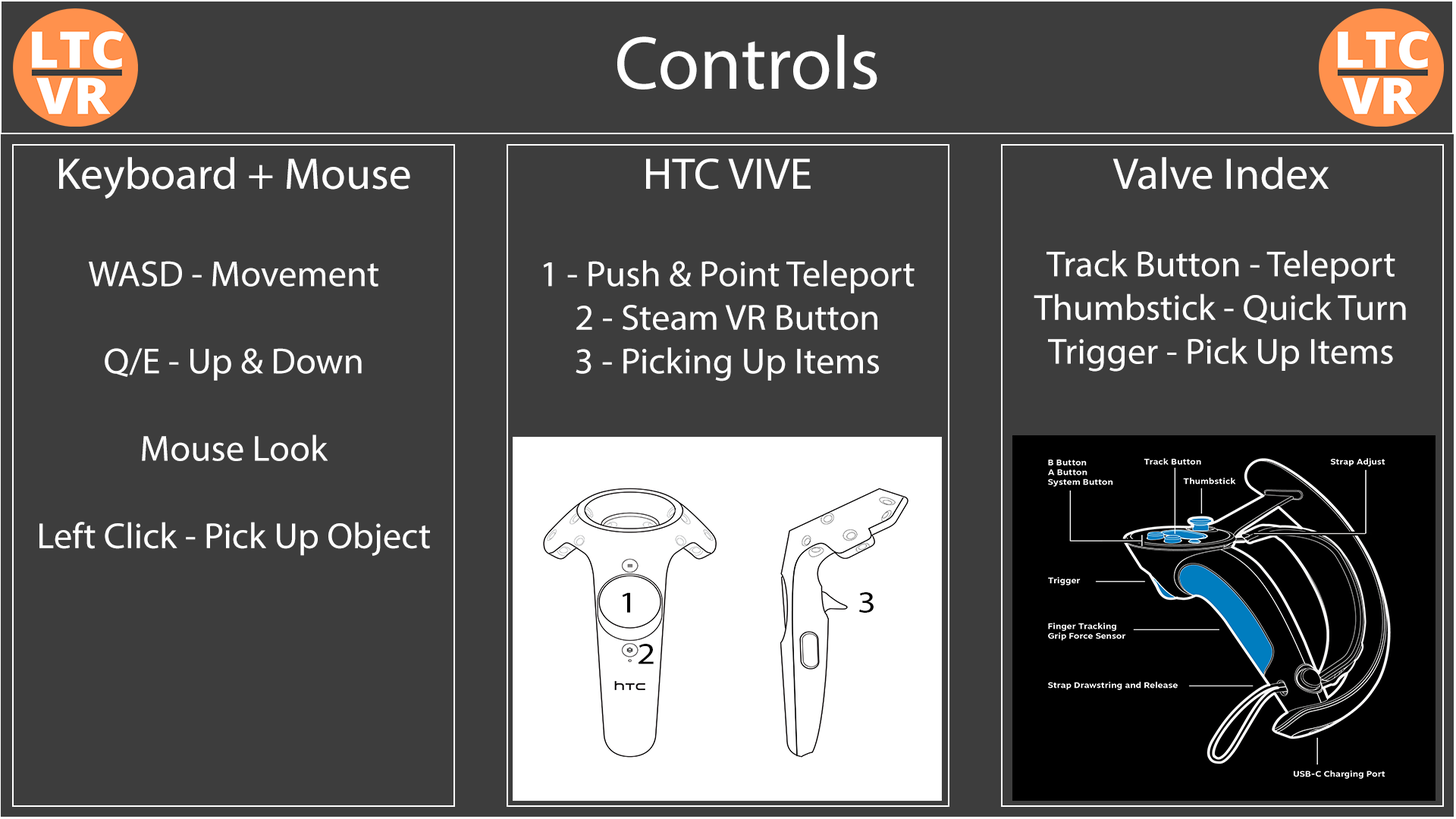
<style>
.page{position:relative;width:1456px;height:819px;background:#3d3d3d}
.page>*{position:absolute;margin:0}
.t1{font:75.8px "MyriadPro-Regular";color:#ffffff}
.t2{font:36.4px "MyriadPro-Regular";color:#ffffff}
.t3{font:44.6px "MyriadPro-Regular";color:#ffffff}
.t4{font:30.3px "MyriadPro-Regular";color:#000000;scale:1.19 1}
</style>
<div class="page">
<p class="t1" style="left:617px;top:35px;width:260px;height:54px">Controls</p>
<p class="t2" style="left:39px;top:157px;width:391px;height:399px;text-align:justify"><span class="t3">Keyboard + Mouse<br><br></span>WASD - Movement<br><br>Q/E - Up &amp; Down<br><br>Mouse Look<br><br>Left Click - Pick Up Object</p>
<p class="t2" style="left:543px;top:158px;width:372px;height:223px;text-align:justify"><span class="t3">HTC VIVE<br><br></span>1 - Push &amp; Point Teleport<br>2 - Steam VR Button<br>3 - Picking Up Items</p>
<p class="t2" style="left:1034px;top:157px;width:372px;height:215px;text-align:justify"><span class="t3">Valve Index<br></span><br>Track Button - Teleport<br>Thumbstick - Quick Turn<br>Trigger - Pick Up Items</p>
<p class="t4" style="left:622px;top:592px;width:8px;height:21px">1</p>
<p class="t4" style="left:858px;top:592px;width:16px;height:21px">3</p>
<p class="t4" style="left:639px;top:644px;width:15px;height:20px">2</p>
</div>
